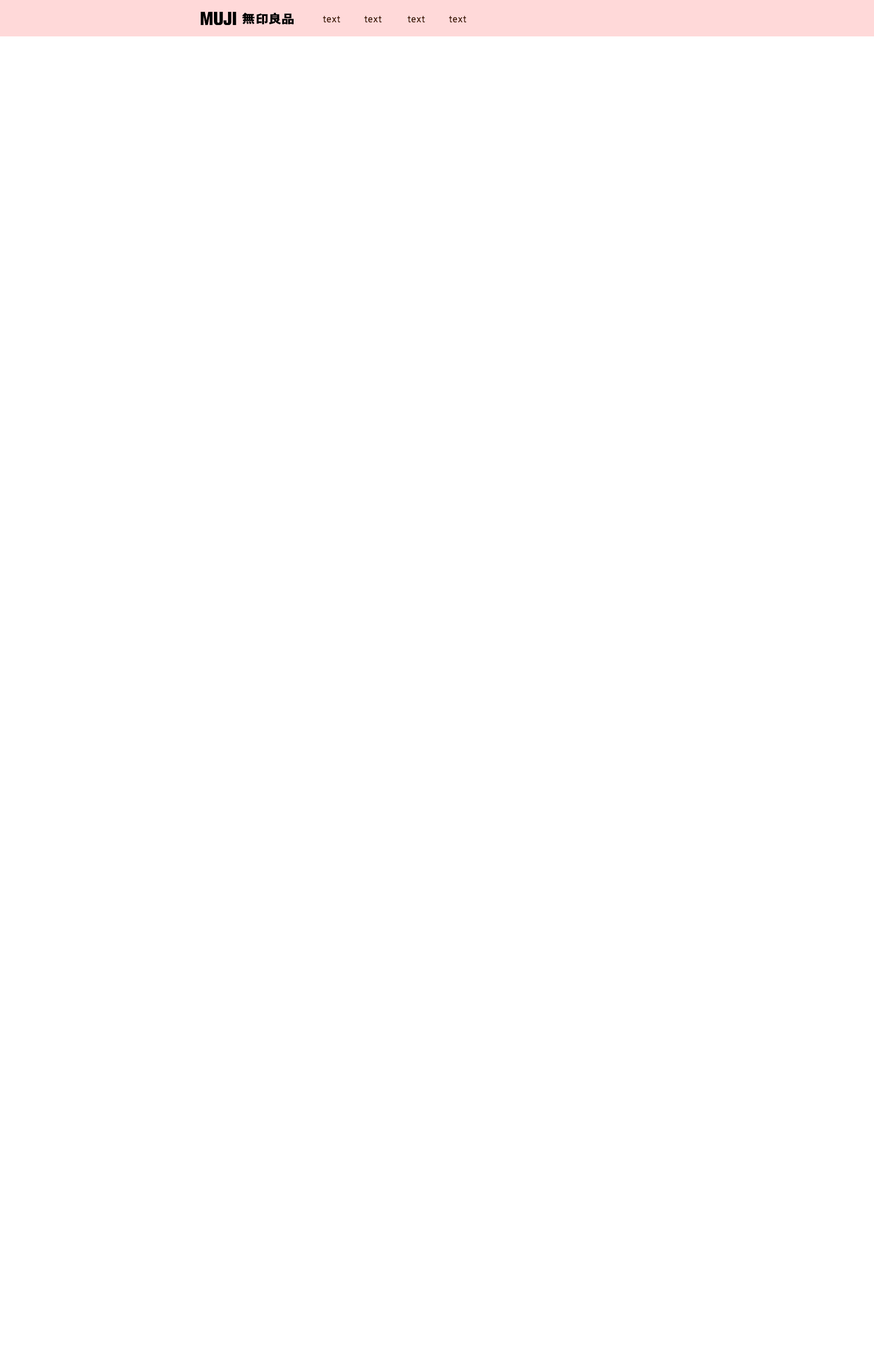
<style>
.page{position:relative;width:874px;height:1365px;background:#ffffff}
.page>*{position:absolute;margin:0}
.t1{font:9.1px "NanumGothicOTFBold";letter-spacing:0.05em;color:#421c08}
</style>
<div class="page">
<p class="t1" style="left:323px;top:16px;width:17px;height:7px">text</p>
<p class="t1" style="left:364px;top:16px;width:18px;height:7px">text</p>
<p class="t1" style="left:407px;top:16px;width:18px;height:7px">text</p>
<p class="t1" style="left:449px;top:16px;width:17px;height:7px">text</p>
</div>
